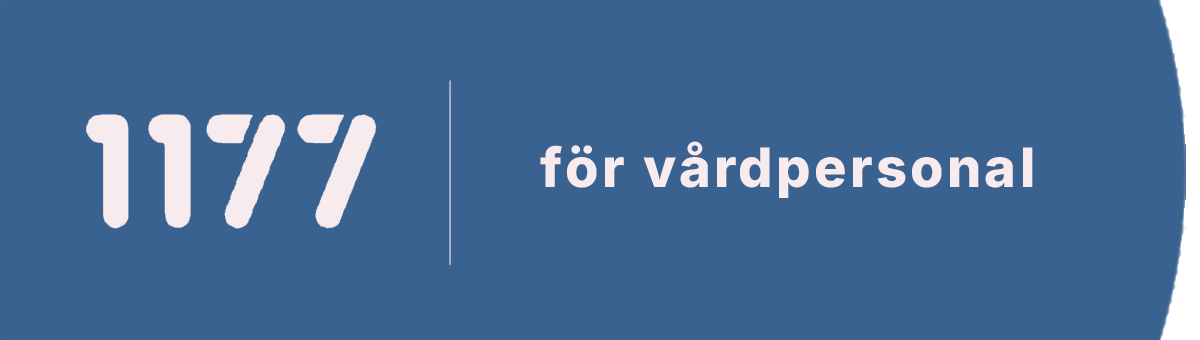
<style>
.page{position:relative;width:1200px;height:340px;background:#396291}
.page>*{position:absolute;margin:0}
.t1{font:54.2px "Inter-ExtraBold";letter-spacing:0.06em;color:#f8ebee}
</style>
<div class="page">
<p class="t1" style="left:540px;top:141px;width:493px;height:57px">för vårdpersonal</p>
</div>
